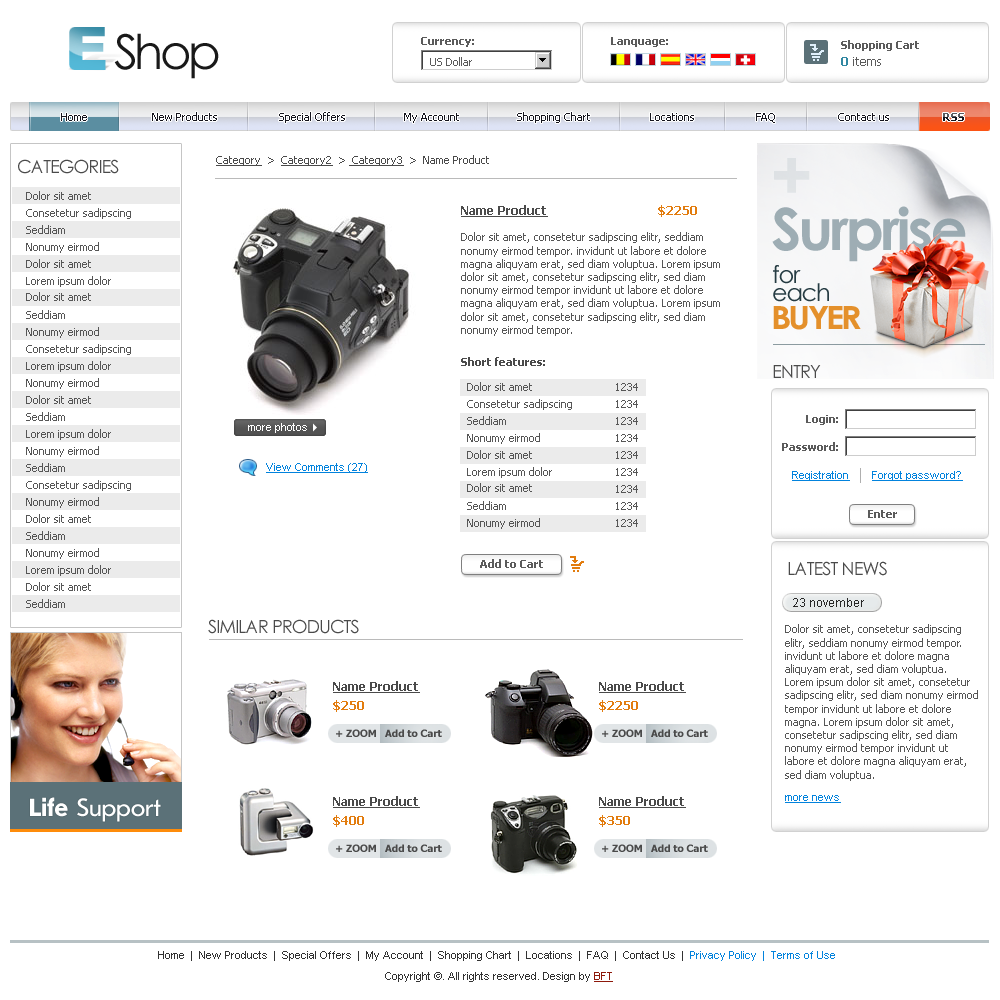
<style>
.page{position:relative;width:1000px;height:1000px;background:#ffffff}
.page>*{position:absolute;margin:0}
.t1{font:48px "CenturyGothic";letter-spacing:-0.075em;color:#191919}
.t2{font:11px "Tahoma-Bold";color:#5b5b5b}
.t3{font:11px "Tahoma";color:#5b5b5b}
.t4{font:12px "Tahoma";color:#5b5b5b}
.t5{font:12px "Tahoma-Bold";color:#3288a2}
.t6{font:11px "Tahoma";color:#15151d}
.t7{font:11px "Tahoma-Bold"}
.t8{font:18px "CenturyGothic";letter-spacing:-0.05em;color:#4a4a4a;text-transform:uppercase}
.t9{font:11px "Tahoma";color:#4a4a4a}
.t10{font:11px "Tahoma";color:#4a4a4a;text-decoration:underline}
.t11{font:72px "CenturyGothic-Bold";letter-spacing:-0.05em;color:#dfe2e5}
.t12{font:11px "Tahoma";color:#565656}
.t13{font:12px "Tahoma-Bold";color:#4a4a4a;text-decoration:underline}
.t14{font:12px "Tahoma-Bold";color:#e27c0e}
.t15{font:58px "CenturyGothic-Bold";letter-spacing:-0.05em;color:#9eadb4}
.t16{font:11px/18px "Tahoma";color:#565656}
.t17{font:24px/18px "CenturyGothic";letter-spacing:-0.05em;color:#263c43}
.t18{font:32px "CenturyGothic-Bold";letter-spacing:-0.1em;color:#e4902b;text-transform:uppercase;scale:1.1 1}
.t19{font:11px "Tahoma-Bold";color:#4a4a4a}
.t20{font:10.4px "ArialMT";color:#ffffff}
.t21{font:11px "ArialMT";color:#0283dd;text-decoration:underline}
.t22{font:12px "ArialMT";color:#272727}
.t23{font:10px "Tahoma-Bold";color:#4a4a4a;text-transform:uppercase}
.t24{font:10px "Tahoma-Bold";color:#4a4a4a}
.t25{font:26px "UkrainianJournalSans";letter-spacing:-0.025em;color:#ffffff}
.t26{font:26px "UkrainianJournalSansBold";letter-spacing:-0.025em;color:#ffffff}
.t27{font:11px "ArialMT";color:#323232}
.t28{font:11px "ArialMT";color:#0283dd}
.t29{font:11px "ArialMT";color:#8e190b;text-decoration:underline}
</style>
<div class="page">
<p class="t1" style="left:114px;top:33px;width:105px;height:46px">Shop</p>
<p class="t2" style="left:421px;top:37px;width:53px;height:10px">Currency:</p>
<p class="t2" style="left:611px;top:37px;width:57px;height:10px">Lanquage:</p>
<p class="t2" style="left:841px;top:40px;width:78px;height:11px">Shopping Cart</p>
<p class="t3" style="left:430px;top:57px;width:42px;height:9px">US Dollar</p>
<p class="t4" style="left:841px;top:57px;width:40px;height:9px"><span class="t5">0</span> items</p>
<p class="t6" style="left:61px;top:113px;width:26px;height:8px">Home</p>
<p class="t6" style="left:152px;top:112px;width:65px;height:9px">New Products</p>
<p class="t6" style="left:279px;top:112px;width:66px;height:11px">Special Offers</p>
<p class="t6" style="left:404px;top:113px;width:55px;height:10px">My Account</p>
<p class="t6" style="left:517px;top:112px;width:73px;height:11px">Shopping Chart</p>
<p class="t6" style="left:650px;top:113px;width:44px;height:8px">Locations</p>
<p class="t6" style="left:756px;top:113px;width:19px;height:10px">FAQ</p>
<p class="t6" style="left:838px;top:113px;width:51px;height:8px">Contact us</p>
<p class="t7" style="left:943px;top:113px;width:21px;height:8px">RSS</p>
<p class="t8" style="left:18px;top:159px;width:101px;height:15px">Categories</p>
<p class="t9" style="left:216px;top:155px;width:273px;height:11px"><span class="t10">Category</span>  &gt;  <span class="t10">Category2</span>  &gt; <span class="t10"> Category3</span>  &gt;  Name Product</p>
<p class="t11" style="left:774px;top:158px;width:36px;height:35px">+</p>
<p class="t12" style="left:26px;top:191px;width:65px;height:9px">Dolor sit amet</p>
<p class="t12" style="left:26px;top:208px;width:105px;height:11px">Consetetur sadipscing</p>
<p class="t13" style="left:461px;top:205px;width:87px;height:12px">Name Product</p>
<p class="t14" style="left:658px;top:205px;width:39px;height:12px">$2250</p>
<p class="t15" style="left:772px;top:206px;width:194px;height:56px">Surprise</p>
<p class="t12" style="left:26px;top:225px;width:39px;height:9px">Seddiam</p>
<p class="t12" style="left:461px;top:232px;width:259px;height:104px"><span class="t16">Dolor sit amet, consetetur </span>sadipscing elitr, seddiam nonumy eirmod tempor. invidunt ut labore et dolore magna aliquyam erat, sed diam voluptua. Lorem ipsum dolor sit amet, consetetur sadipscing elitr, sed diam nonumy eirmod tempor invidunt ut labore et dolore magna aliquyam erat, sed diam voluptua. Lorem ipsum dolor sit amet, consetetur sadipscing elitr, sed diam nonumy eirmod tempor.<br> invidunt ut labore et dolore magna aliquyam erat, sed diam voluptua. Lorem ipsum dolor sit amet, consetetur</p>
<p class="t12" style="left:26px;top:242px;width:73px;height:11px">Nonumy eirmod</p>
<p class="t12" style="left:26px;top:259px;width:65px;height:9px">Dolor sit amet</p>
<p class="t17" style="left:773px;top:265px;width:56px;height:37px">for <br>each</p>
<p class="t12" style="left:26px;top:276px;width:85px;height:11px">Lorem ipsum dolor</p>
<p class="t12" style="left:26px;top:292px;width:65px;height:9px">Dolor sit amet</p>
<p class="t12" style="left:26px;top:310px;width:39px;height:9px">Seddiam</p>
<p class="t18" style="left:773px;top:306px;width:88px;height:24px">buyer</p>
<p class="t12" style="left:26px;top:327px;width:73px;height:11px">Nonumy eirmod</p>
<p class="t12" style="left:26px;top:344px;width:105px;height:11px">Consetetur sadipscing</p>
<p class="t12" style="left:26px;top:361px;width:85px;height:11px">Lorem ipsum dolor</p>
<p class="t19" style="left:461px;top:357px;width:84px;height:9px">Short features:</p>
<p class="t8" style="left:773px;top:365px;width:48px;height:13px">Entry</p>
<p class="t12" style="left:26px;top:378px;width:73px;height:11px">Nonumy eirmod</p>
<p class="t12" style="left:467px;top:382px;width:65px;height:9px">Dolor sit amet</p>
<p class="t12" style="left:616px;top:383px;width:22px;height:8px">1234</p>
<p class="t12" style="left:26px;top:395px;width:65px;height:9px">Dolor sit amet</p>
<p class="t12" style="left:467px;top:399px;width:105px;height:11px">Consetetur sadipscing</p>
<p class="t12" style="left:616px;top:400px;width:22px;height:8px">1234</p>
<p class="t12" style="left:26px;top:412px;width:39px;height:9px">Seddiam</p>
<p class="t20" style="left:248px;top:423px;width:59px;height:10px">more photos</p>
<p class="t12" style="left:467px;top:416px;width:39px;height:9px">Seddiam</p>
<p class="t12" style="left:616px;top:417px;width:22px;height:8px">1234</p>
<p class="t2" style="left:806px;top:415px;width:32px;height:10px">Login:</p>
<p class="t12" style="left:26px;top:429px;width:85px;height:11px">Lorem ipsum dolor</p>
<p class="t12" style="left:467px;top:433px;width:73px;height:11px">Nonumy eirmod</p>
<p class="t12" style="left:616px;top:434px;width:22px;height:8px">1234</p>
<p class="t12" style="left:26px;top:446px;width:73px;height:11px">Nonumy eirmod</p>
<p class="t2" style="left:782px;top:442px;width:56px;height:9px">Password:</p>
<p class="t12" style="left:467px;top:450px;width:65px;height:9px">Dolor sit amet</p>
<p class="t12" style="left:616px;top:451px;width:22px;height:8px">1234</p>
<p class="t12" style="left:26px;top:463px;width:39px;height:9px">Seddiam</p>
<p class="t21" style="left:266px;top:463px;width:102px;height:10px">View Comments (27)</p>
<p class="t12" style="left:467px;top:467px;width:85px;height:11px">Lorem ipsum dolor</p>
<p class="t12" style="left:616px;top:468px;width:22px;height:8px">1234</p>
<p class="t21" style="left:792px;top:471px;width:58px;height:10px">Registration</p>
<p class="t21" style="left:872px;top:471px;width:91px;height:10px">Forgot password?</p>
<p class="t12" style="left:26px;top:480px;width:105px;height:11px">Consetetur sadipscing</p>
<p class="t12" style="left:467px;top:483px;width:65px;height:9px">Dolor sit amet</p>
<p class="t12" style="left:616px;top:485px;width:22px;height:8px">1234</p>
<p class="t12" style="left:26px;top:497px;width:73px;height:11px">Nonumy eirmod</p>
<p class="t12" style="left:467px;top:501px;width:39px;height:9px">Seddiam</p>
<p class="t12" style="left:616px;top:502px;width:22px;height:8px">1234</p>
<p class="t2" style="left:868px;top:510px;width:29px;height:8px">Enter</p>
<p class="t12" style="left:26px;top:514px;width:65px;height:9px">Dolor sit amet</p>
<p class="t12" style="left:467px;top:518px;width:73px;height:11px">Nonumy eirmod</p>
<p class="t12" style="left:616px;top:519px;width:22px;height:8px">1234</p>
<p class="t12" style="left:26px;top:531px;width:39px;height:9px">Seddiam</p>
<p class="t12" style="left:26px;top:548px;width:73px;height:11px">Nonumy eirmod</p>
<p class="t12" style="left:26px;top:565px;width:85px;height:11px">Lorem ipsum dolor</p>
<p class="t2" style="left:480px;top:559px;width:63px;height:9px">Add to Cart</p>
<p class="t8" style="left:788px;top:561px;width:99px;height:15px">Latest news</p>
<p class="t12" style="left:26px;top:582px;width:65px;height:9px">Dolor sit amet</p>
<p class="t12" style="left:26px;top:599px;width:39px;height:9px">Seddiam</p>
<p class="t22" style="left:793px;top:598px;width:71px;height:9px">23 november</p>
<p class="t8" style="left:208px;top:619px;width:151px;height:15px">Similar products</p>
<p class="t12" style="left:785px;top:624px;width:193px;height:157px"><span class="t16">Dolor sit amet, consetetur </span>sadipscing elitr, seddiam nonumy eirmod tempor. invidunt ut labore et dolore magna aliquyam erat, sed diam voluptua. Lorem ipsum dolor sit amet, consetetur sadipscing elitr, sed diam nonumy eirmod tempor invidunt ut labore et dolore magna. Lorem ipsum dolor sit amet, consetetur sadipscing elitr, sed diam nonumy eirmod tempor invidunt ut labore et dolore magna aliquyam erat, sed diam voluptua.<br> Lorem ipsum dolor sit amet, consetetur</p>
<p class="t13" style="left:333px;top:681px;width:87px;height:12px">Name Product</p>
<p class="t13" style="left:599px;top:681px;width:87px;height:12px">Name Product</p>
<p class="t14" style="left:333px;top:700px;width:31px;height:12px">$250</p>
<p class="t14" style="left:599px;top:700px;width:39px;height:12px">$2250</p>
<p class="t23" style="left:336px;top:729px;width:40px;height:8px">+ ZOOM</p>
<p class="t24" style="left:385px;top:729px;width:57px;height:8px">Add to Cart</p>
<p class="t23" style="left:602px;top:729px;width:40px;height:8px">+ ZOOM</p>
<p class="t24" style="left:651px;top:729px;width:57px;height:8px">Add to Cart</p>
<p class="t25" style="left:30px;top:797px;width:131px;height:25px"><span class="t26">Life </span>Support</p>
<p class="t13" style="left:333px;top:796px;width:87px;height:12px">Name Product</p>
<p class="t13" style="left:599px;top:796px;width:87px;height:12px">Name Product</p>
<p class="t21" style="left:785px;top:795px;width:56px;height:8px">more news</p>
<p class="t14" style="left:333px;top:815px;width:31px;height:12px">$400</p>
<p class="t14" style="left:599px;top:815px;width:31px;height:12px">$350</p>
<p class="t23" style="left:336px;top:844px;width:40px;height:8px">+ ZOOM</p>
<p class="t24" style="left:385px;top:844px;width:57px;height:8px">Add to Cart</p>
<p class="t23" style="left:602px;top:844px;width:40px;height:8px">+ ZOOM</p>
<p class="t24" style="left:651px;top:844px;width:57px;height:8px">Add to Cart</p>
<p class="t27" style="left:158px;top:951px;width:677px;height:10px">Home  |  New Products  |  Special Offers  |  My Account  |  Shopping Chart  |  Locations  |  FAQ  |  Contact Us  |  <span class="t28">Privacy Policy  |  Terms of Use</span></p>
<p class="t27" style="left:385px;top:972px;width:228px;height:10px">Copyright ©. All rights reserved. Design by <span class="t29">BFT</span></p>
</div>
